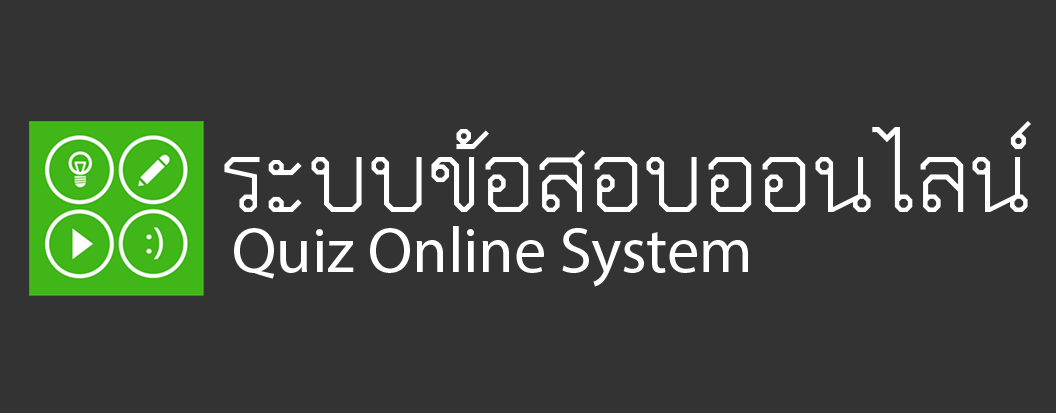
<style>
.page{position:relative;width:1056px;height:413px;background:#333333}
.page>*{position:absolute;margin:0}
.t1{font:138.9px "THChakraPetch";color:#ffffff}
.t2{font:64.4px "MyriadPro-Regular";color:#ffffff}
</style>
<div class="page">
<p class="t1" style="left:224px;top:121px;width:807px;height:91px">ระบบข้อสอบออนไลน์</p>
<p class="t2" style="left:234px;top:226px;width:514px;height:61px">Quiz Online System</p>
</div>
